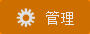
<style>
.page{position:relative;width:90px;height:34px;background:#cc6e00}
.page>*{position:absolute;margin:0}
.t1{font:15.2px "SimSun";color:#e9e9e9}
</style>
<div class="page">
<p class="t1" style="left:46px;top:11px;width:28px;height:14px">管理</p>
</div>
